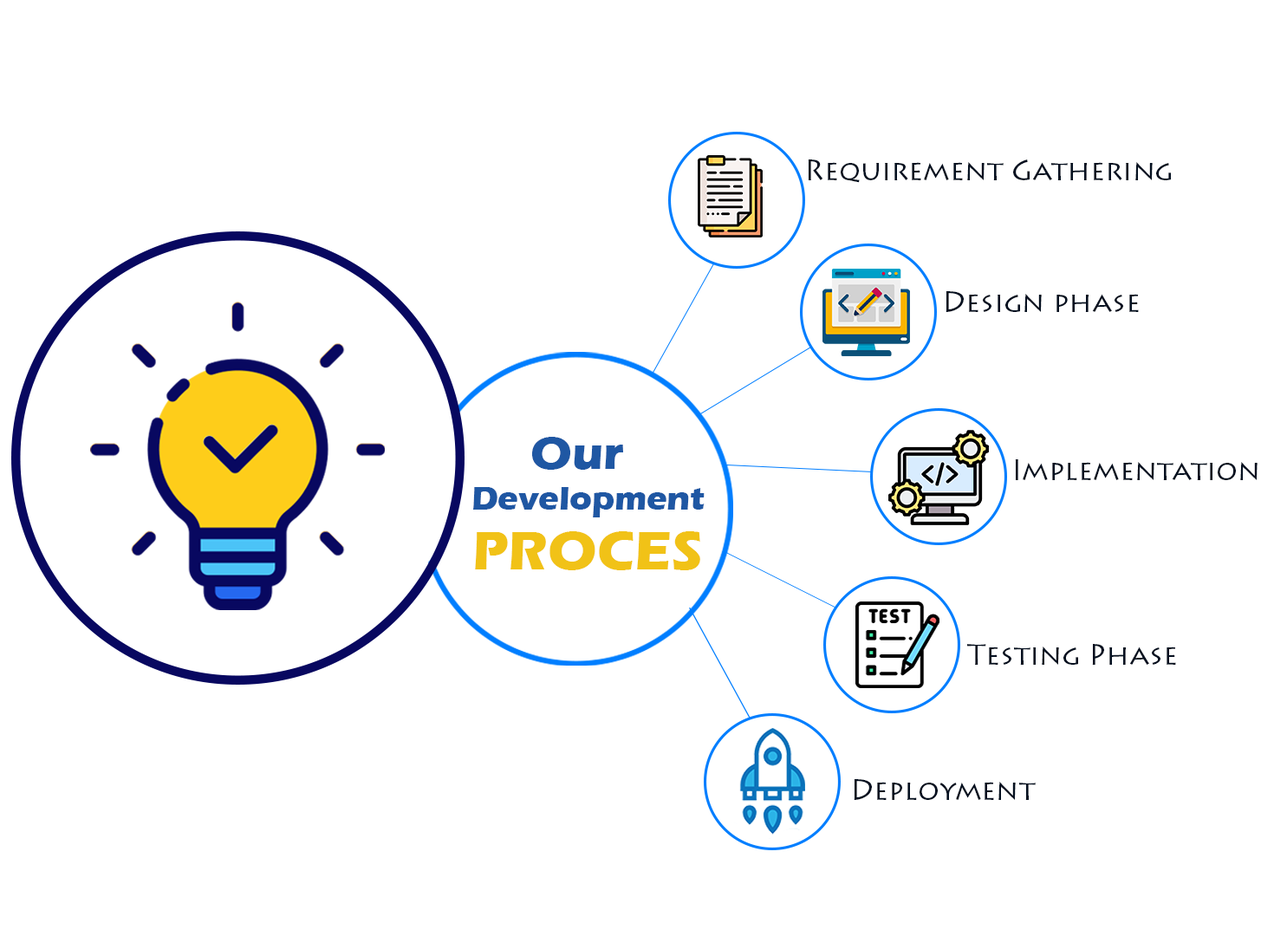
<style>
.page{position:relative;width:1274px;height:936px;background:#ffffff}
.page>*{position:absolute;margin:0}
.t1{font:28.8px "LithosPro-Regular";color:#041020}
.t2{font:47.3px "ErasITC-Bold";color:#1f57a3}
.t3{font:33.9px "ErasITC-Bold";color:#1f57a3}
.t4{font:56.1px "ErasITC-Bold";color:#f1c216}
</style>
<div class="page">
<p class="t1" style="left:808px;top:159px;width:363px;height:24px">Requirement Gathering</p>
<p class="t1" style="left:946px;top:291px;width:193px;height:21px">Design phase</p>
<p class="t2" style="left:532px;top:437px;width:91px;height:33px">Our</p>
<p class="t1" style="left:1015px;top:459px;width:243px;height:21px">Implementation</p>
<p class="t3" style="left:473px;top:487px;width:232px;height:30px">Development</p>
<p class="t4" style="left:475px;top:531px;width:225px;height:39px">PROCES</p>
<p class="t1" style="left:967px;top:644px;width:209px;height:21px">Testing Phase</p>
<p class="t1" style="left:854px;top:779px;width:182px;height:21px">Deployment</p>
</div>
